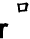
<style>
.page{position:relative;width:30px;height:39px;background:#ffffff}
.page>*{position:absolute;margin:0}
.t1{font:18px "DFKaiShu-SB-Estd-BF";color:#000000;font-weight:bold}
.t2{font:27px "ArialMT";color:#000000;font-weight:bold}
</style>
<div class="page">
<p class="t1" style="left:17px;top:2px;width:12px;height:11px">口</p>
<p class="t2" style="left:0px;top:23px;width:9px;height:16px">r</p>
</div>
